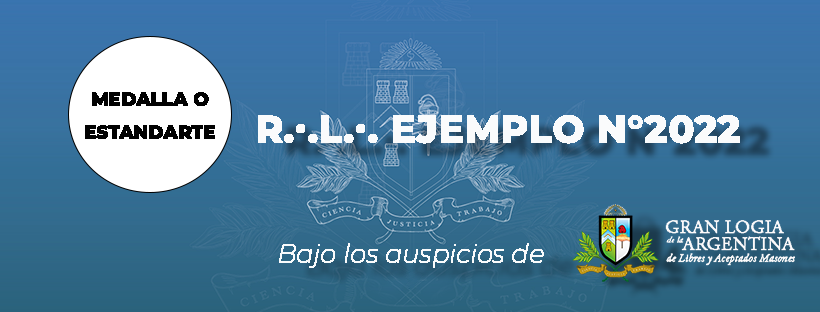
<style>
.page{position:relative;width:820px;height:312px}
.page>*{position:absolute;margin:0}
.t1{font:18px/32.6px "Montserrat-ExtraBold";letter-spacing:-0.01em;color:#020202;text-transform:uppercase;font-weight:bold}
.t2{font:38px "Montserrat-ExtraBold";letter-spacing:-0.01em;color:#fafbfc;text-transform:uppercase;font-weight:bold}
.t3{font:25.5px "Montserrat-ThinItalic";letter-spacing:-0.01em;color:#fafbfc;font-weight:bold}
</style>
<div class="page">
<p class="t1" style="left:85px;top:92px;width:130px;height:47px;text-align:center">medalla o<br>estandarte</p>
<p class="t2" style="left:258px;top:115px;width:482px;height:29px">R.·.L.·. Ejemplo N°2022</p>
<p class="t3" style="left:279px;top:243px;width:265px;height:25px">Bajo los auspicios de</p>
</div>
